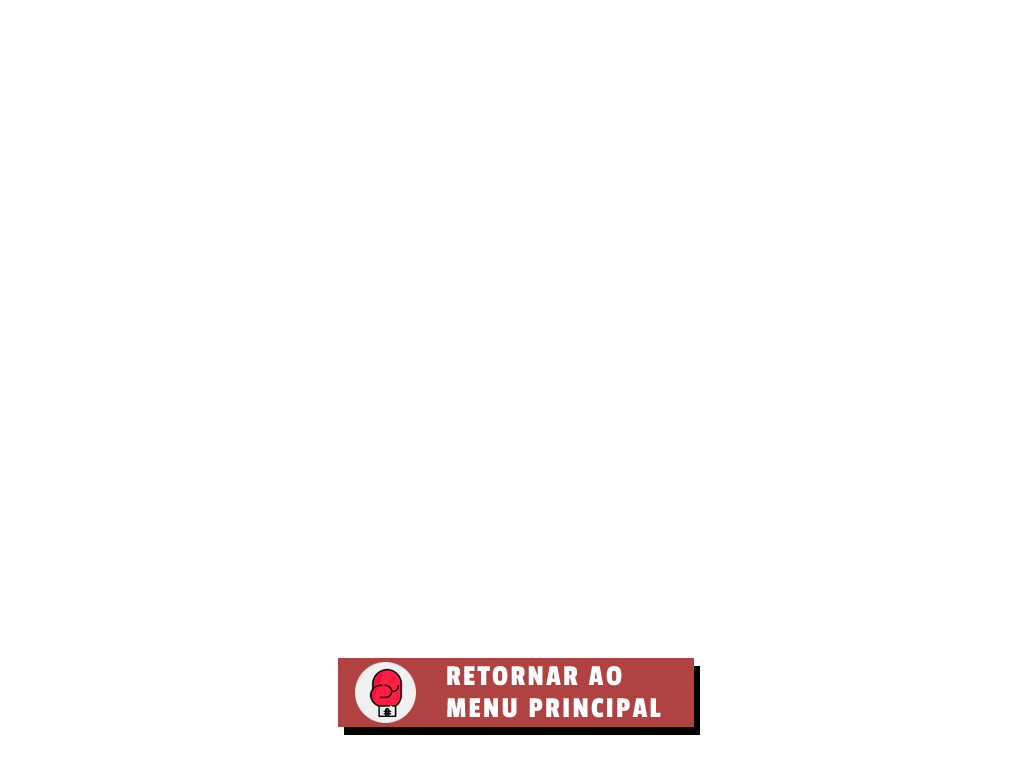
<style>
.page{position:relative;width:1024px;height:768px;background:#ffffff}
.page>*{position:absolute;margin:0}
.t1{font:30px "PassionOne-Regular";letter-spacing:0.075em;color:#ffffff}
</style>
<div class="page">
<p class="t1" style="left:447px;top:666px;width:175px;height:20px">RETORNAR AO</p>
<p class="t1" style="left:447px;top:698px;width:214px;height:20px">MENU PRINCIPAL</p>
</div>
